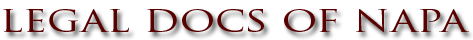
<style>
.page{position:relative;width:473px;height:40px;background:#ffffff}
.page>*{position:absolute;margin:0}
.t1{font:35px "TrajanPro-Regular";color:#570101;scale:1.24 1}
</style>
<div class="page">
<p class="t1" style="left:3px;top:8px;width:466px;height:25px">legal docs of napa</p>
</div>
